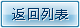
<style>
.page{position:relative;width:80px;height:28px}
.page>*{position:absolute;margin:0}
.t1{font:13.3px "MicrosoftYaHei";letter-spacing:0.1em;color:#003466}
.t2{font:13.3px "MicrosoftYaHei";letter-spacing:0.1em;color:#e7e7e7}
</style>
<div class="page">
<p class="t1" style="left:12px;top:8px;width:56px;height:12px">返回列表</p>
<p class="t2" style="left:13px;top:9px;width:56px;height:12px">返回列表</p>
</div>
